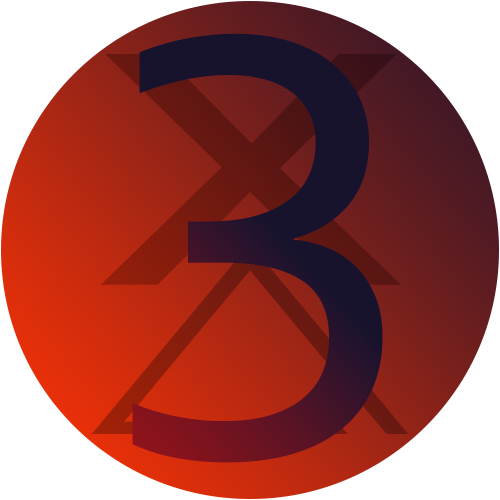
<style>
.page{position:relative;width:500px;height:500px;background:#ffffff}
.page>*{position:absolute;margin:0}
.t1{font:632.3px "Corbel";letter-spacing:-0.01em;color:#17132d;scale:1.06 1}
.t2{font:497px "Corbel";letter-spacing:-0.01em;scale:1.38 1}
</style>
<div class="page">
<p class="t1" style="left:132px;top:33px;width:251px;height:430px">3</p>
<p class="t2" style="left:101px;top:54px;width:300px;height:231px">x</p>
</div>
